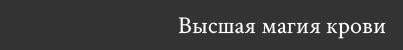
<style>
.page{position:relative;width:403px;height:50px;background:#333333}
.page>*{position:absolute;margin:0}
.t1{font:24px "CrimsonText-Regular";color:#ffffff}
</style>
<div class="page">
<p class="t1" style="left:178px;top:17px;width:208px;height:22px">Высшая магия крови</p>
</div>
